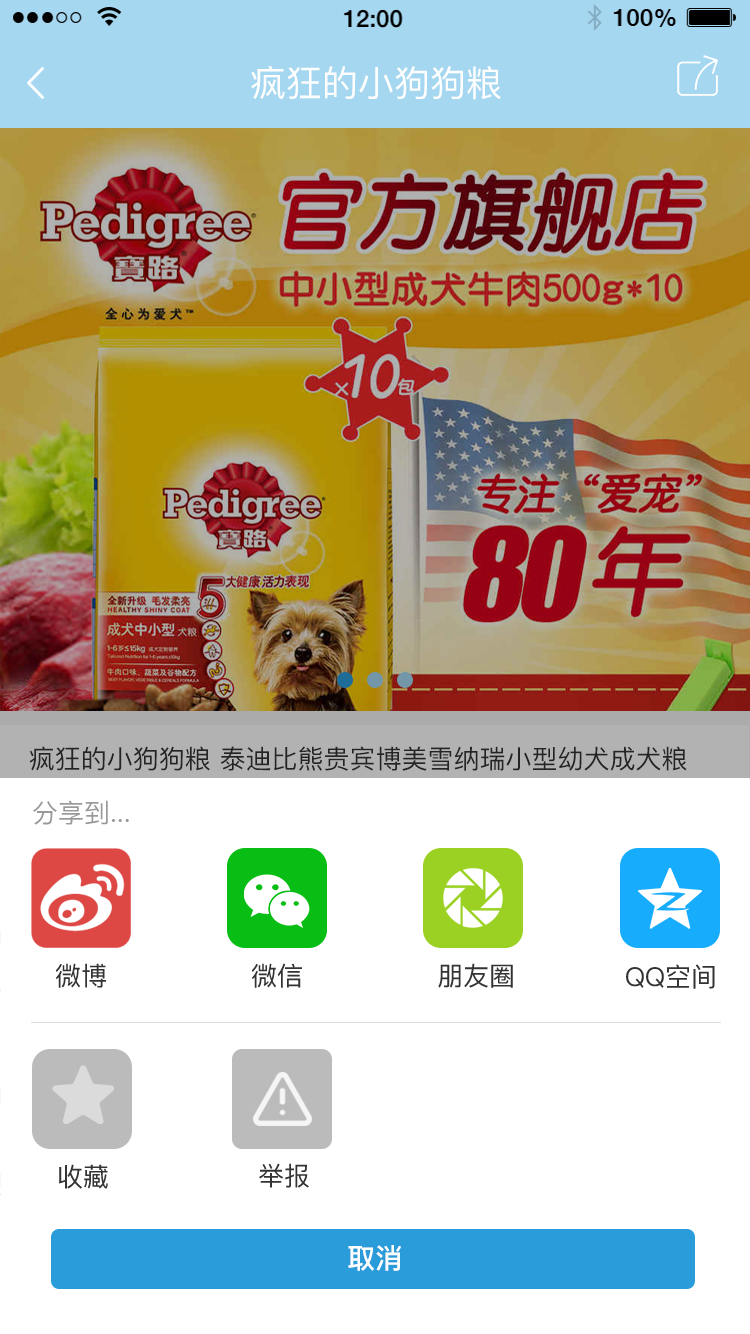
<style>
.page{position:relative;width:750px;height:1334px;background:#ffffff}
.page>*{position:absolute;margin:0}
.t1{font:36px "PingFangSC-Regular";color:#fefefe}
.t2{font:26px/36px "PingFangSC-Regular";color:#333333}
.t3{font:26px "PingFangSC-Regular";color:#999999}
.t4{font:26px "PingFangSC";color:#333333}
.t5{font:28px "PingFangSC-Medium";color:#ffffff}
</style>
<div class="page">
<p class="t1" style="left:251px;top:66px;width:250px;height:34px">疯狂的小狗狗粮</p>
<p class="t2" style="left:29px;top:746px;width:658px;height:61px">疯狂的小狗狗粮 泰迪比熊贵宾博美雪纳瑞小型幼犬成犬粮<br>通用型3斤</p>
<p class="t3" style="left:33px;top:800px;width:96px;height:25px">分享到...</p>
<p class="t4" style="left:56px;top:963px;width:50px;height:25px">微博</p>
<p class="t4" style="left:252px;top:963px;width:50px;height:25px">微信</p>
<p class="t4" style="left:438px;top:963px;width:75px;height:25px">朋友圈</p>
<p class="t4" style="left:626px;top:964px;width:89px;height:25px">QQ空间</p>
<p class="t4" style="left:58px;top:1164px;width:50px;height:25px">收藏</p>
<p class="t4" style="left:259px;top:1163px;width:50px;height:25px">举报</p>
<p class="t5" style="left:348px;top:1245px;width:53px;height:26px">取消</p>
</div>
